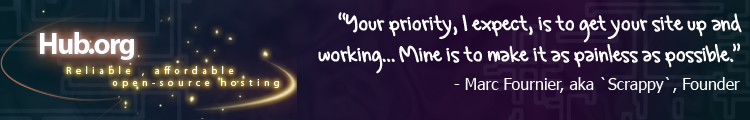
<style>
.page{position:relative;width:750px;height:120px}
.page>*{position:absolute;margin:0}
.t1{font:26px "GregsHand";color:#ffffff}
.t2{font:16px "Tahoma";color:#ffffff}
</style>
<div class="page">
<p class="t1" style="left:318px;top:12px;width:424px;height:62px;text-align:right">“Your priority, I expect, is to get your site up and<br>working... Mine is to make it as painless as possible.”</p>
<p class="t2" style="left:454px;top:77px;width:286px;height:16px">- Marc Fournier, aka `Scrappy`, Founder</p>
</div>
